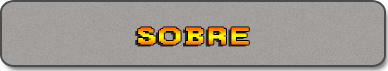
<style>
.page{position:relative;width:388px;height:71px}
.page>*{position:absolute;margin:0}
.t1{font:24px "PeaberryBase";letter-spacing:0.025em;font-weight:bold;scale:1.4 1}
</style>
<div class="page">
<p class="t1" style="left:138px;top:27px;width:111px;height:18px">SOBRE</p>
</div>
